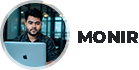
<style>
.page{position:relative;width:139px;height:70px;background:#ffffff}
.page>*{position:absolute;margin:0}
.t1{font:28.4px "Montserrat-Black";color:#212428}
</style>
<div class="page">
<p class="t1" style="left:78px;top:31px;width:60px;height:12px">MONIR</p>
</div>
